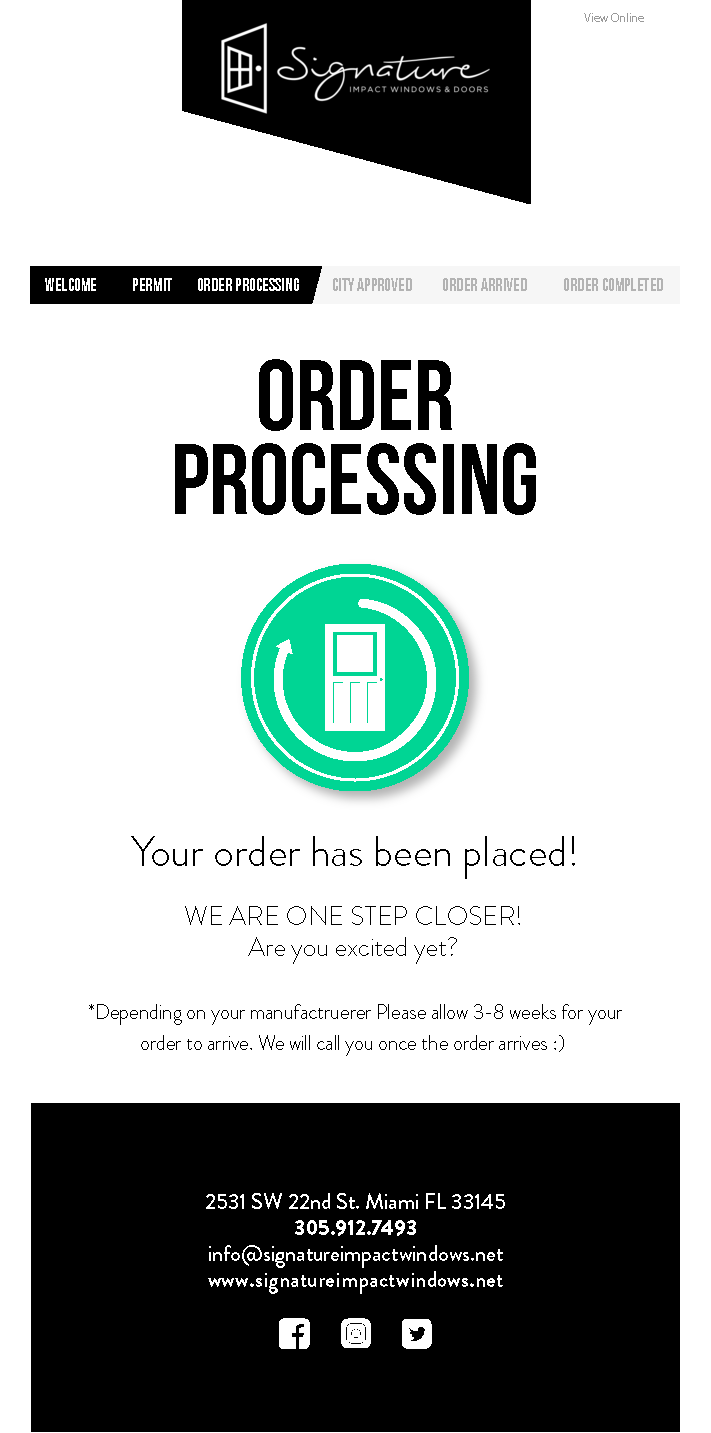
<style>
.page{position:relative;width:711px;height:1433px;background:#ffffff}
.page>*{position:absolute;margin:0}
.t1{font:12px "MyriadPro-Regular";color:#999999}
.t2{font:17.6px "BebasNeueBold";color:#b3b3b3}
.t3{font:17.6px "BebasNeueBold";color:#ffffff}
.t4{font:100px/84px "BebasNeueBold";color:#000000}
.t5{font:41.8px "BrandonGrotesque-Light";color:#000000}
.t6{font:26.5px/31px "BrandonGrotesque-Light";color:#000000}
.t7{font:21px/31px "BrandonGrotesque-Light";color:#000000;scale:0.97 1}
.t8{font:22px/26px "BrandonGrotesque-Medium";color:#ffffff}
.t9{font:22px/26px "BrandonGrotesque-Black";color:#ffffff}
.t10{font:22px/26px "BrandonGrotesque-Bold";letter-spacing:0.015em;color:#ffffff}
</style>
<div class="page">
<p class="t1" style="left:584px;top:13px;width:60px;height:9px">View Online</p>
<p class="t2" style="left:45px;top:278px;width:618px;height:13px"><span class="t3">WELCOME             PERMIT         ORDER PROCESSING</span>            CITY APPROVED           ORDER ARRIVED             ORDER COMPLETED</p>
<p class="t4" style="left:175px;top:359px;width:361px;height:156px;text-align:center">ORDER<br>PROCESSING</p>
<p class="t5" style="left:131px;top:836px;width:444px;height:43px">Your order has been placed!</p>
<p class="t6" style="left:185px;top:906px;width:335px;height:58px;text-align:center">WE ARE ONE STEP CLOSER!<br>Are you excited yet?</p>
<p class="t7" style="left:89px;top:1004px;width:533px;height:52px;text-align:center">*Depending on your manufactruerer Please allow 3-8 weeks for your<br>order to arrive. We will call you once the order arrives :)</p>
<p class="t8" style="left:206px;top:1193px;width:299px;height:101px;text-align:center">2531 SW 22nd St. Miami FL 33145<br><span class="t9">305.912.7493<br></span>info@signatureimpactwindows.net<br><span class="t10">www.signatureimpactwindows.net</span></p>
</div>
